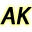
<style>
.page{position:relative;width:32px;height:32px;background:#ffffff}
.page>*{position:absolute;margin:0}
.t1{font:24px "MyriadPro-Regular";color:#000000;font-weight:bold;font-style:italic}
</style>
<div class="page">
<p class="t1" style="left:0px;top:7px;width:32px;height:18px">AK</p>
</div>
